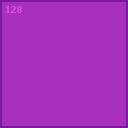
<style>
.page{position:relative;width:128px;height:128px;background:#a730bf}
.page>*{position:absolute;margin:0}
.t1{font:9px "Verdana-Bold";letter-spacing:-0.025em;color:#d64ae1;text-transform:uppercase}
</style>
<div class="page">
<p class="t1" style="left:6px;top:6px;width:16px;height:7px">128</p>
</div>
